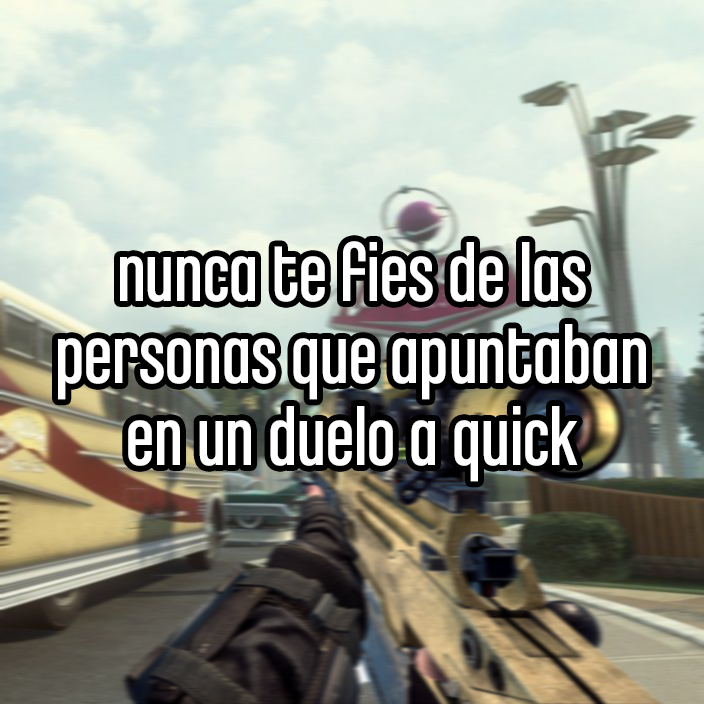
<style>
.page{position:relative;width:704px;height:704px}
.page>*{position:absolute;margin:0}
.t1{font:85.3px "ChaletComprime-CologneEighty";color:#ffffff}
</style>
<div class="page">
<p class="t1" style="left:58px;top:241px;width:588px;height:241px;text-align:center">nunca te fies de las<br>personas que apuntaban<br>en un duelo a quick</p>
</div>
